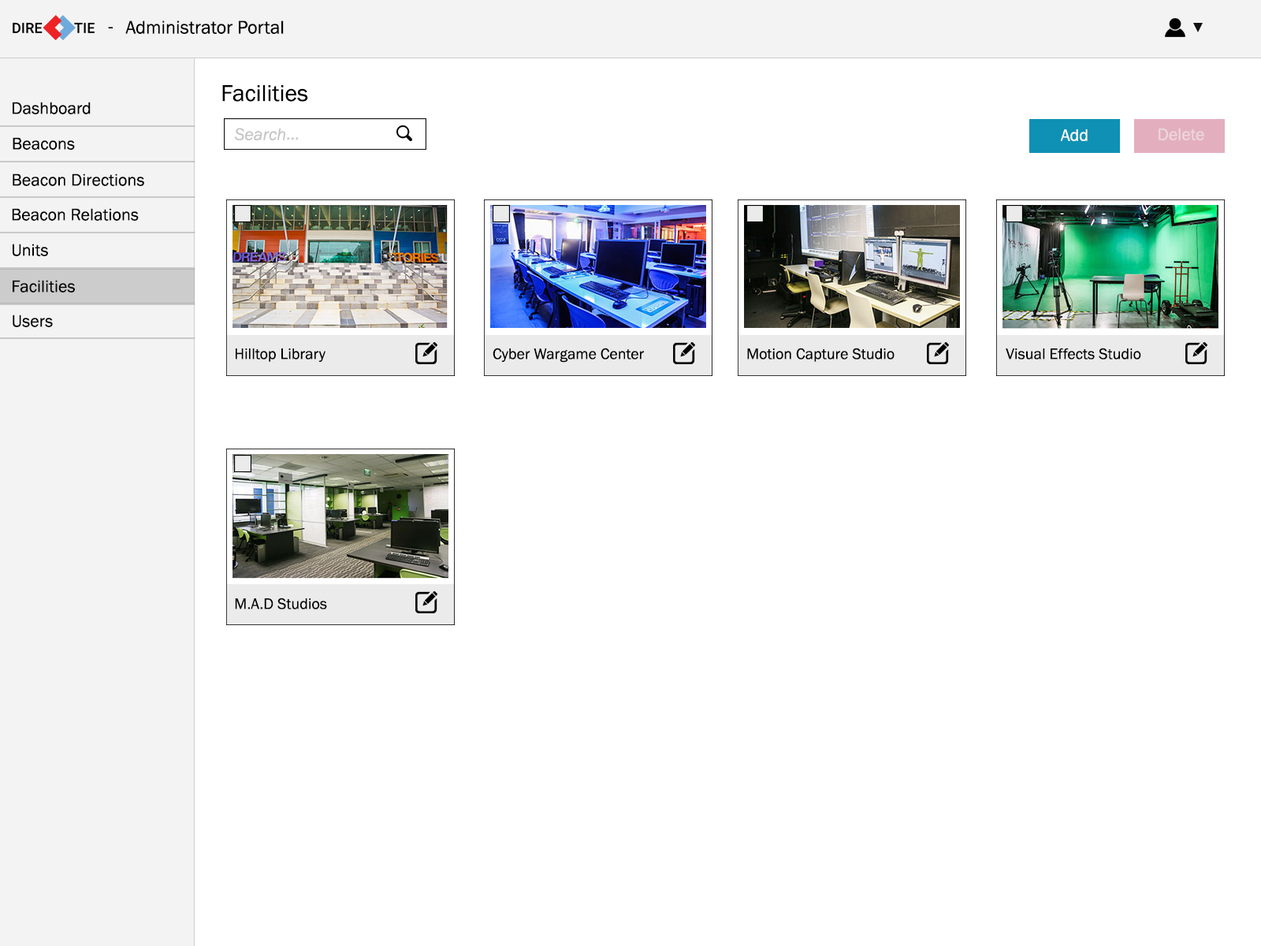
<style>
.page{position:relative;width:1261px;height:946px;background:#ffffff}
.page>*{position:absolute;margin:0}
.t1{font:18.9px "FranklinGothic-Book";color:#000000}
.t2{font:23.6px "FranklinGothic-Book";color:#000000}
.t3{font:17.3px "FranklinGothic-Book";color:#000000}
.t4{font:17.3px "FranklinGothic-Book";color:#ffffff}
.t5{font:17.3px "FranklinGothic-Book";color:#edd6db}
.t6{font:15.7px "FranklinGothic-Book";color:#000000}
</style>
<div class="page">
<p class="t1" style="left:108px;top:27px;width:5px;height:1px">-</p>
<p class="t1" style="left:125px;top:20px;width:159px;height:14px">Administrator Portal</p>
<p class="t2" style="left:222px;top:85px;width:86px;height:17px">Facilities</p>
<p class="t3" style="left:13px;top:102px;width:78px;height:12px">Dashboard</p>
<p class="t3" style="left:13px;top:137px;width:62px;height:13px">Beacons</p>
<p class="t4" style="left:1060px;top:129px;width:28px;height:12px">Add</p>
<p class="t5" style="left:1158px;top:128px;width:46px;height:12px">Delete</p>
<p class="t3" style="left:13px;top:173px;width:131px;height:13px">Beacon Directions</p>
<p class="t3" style="left:12px;top:208px;width:127px;height:13px">Beacon Relations</p>
<p class="t3" style="left:13px;top:244px;width:35px;height:12px">Units</p>
<p class="t3" style="left:13px;top:280px;width:62px;height:12px">Facilities</p>
<p class="t3" style="left:13px;top:314px;width:40px;height:13px">Users</p>
<p class="t6" style="left:236px;top:348px;width:89px;height:14px">Hilltop Library</p>
<p class="t6" style="left:493px;top:348px;width:151px;height:15px">Cyber Wargame Center</p>
<p class="t6" style="left:747px;top:348px;width:147px;height:14px">Motion Capture Studio</p>
<p class="t6" style="left:1006px;top:348px;width:135px;height:11px">Visual Effects Studio</p>
<p class="t6" style="left:235px;top:597px;width:92px;height:12px">M.A.D Studios</p>
</div>
